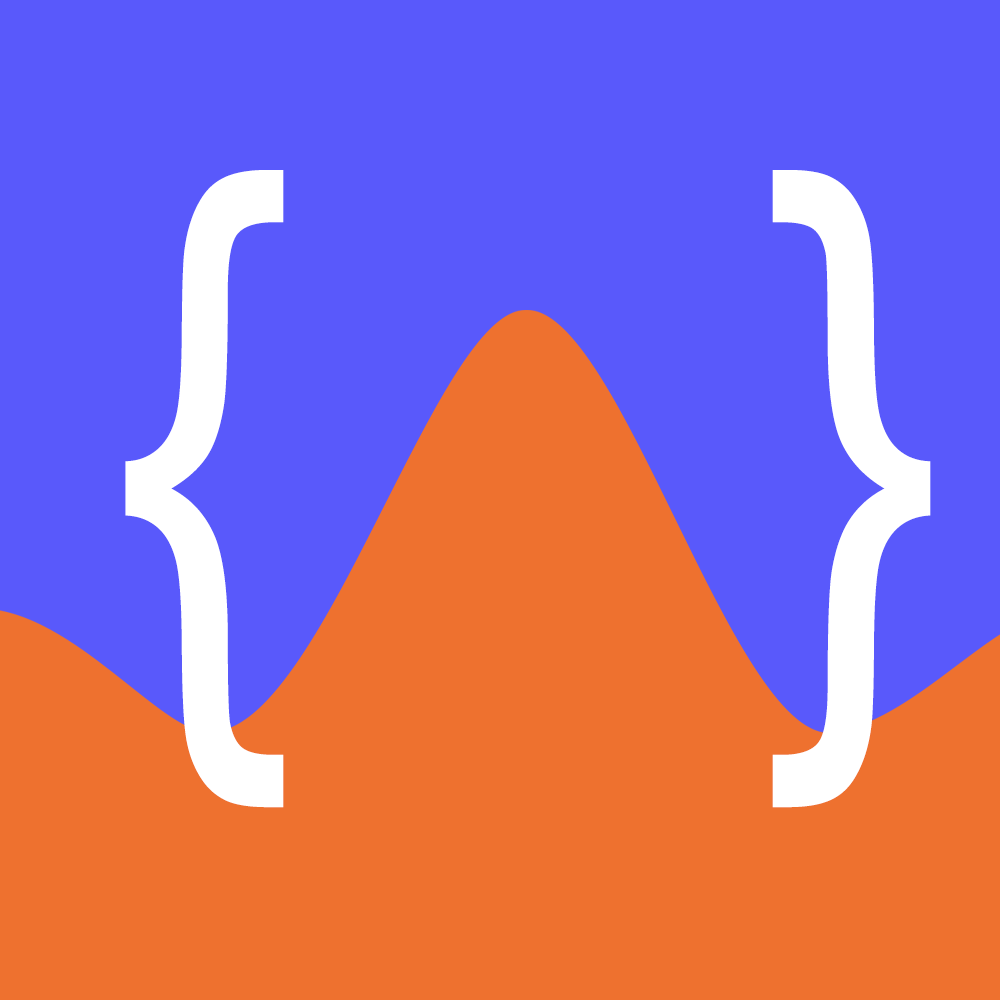
<style>
.page{position:relative;width:1000px;height:1000px;background:#5959fb}
.page>*{position:absolute;margin:0}
.t1{font:678.7px "ArialNarrow";color:#ffffff}
</style>
<div class="page">
<p class="t1" style="left:125px;top:170px;width:806px;height:638px">{   }</p>
</div>
